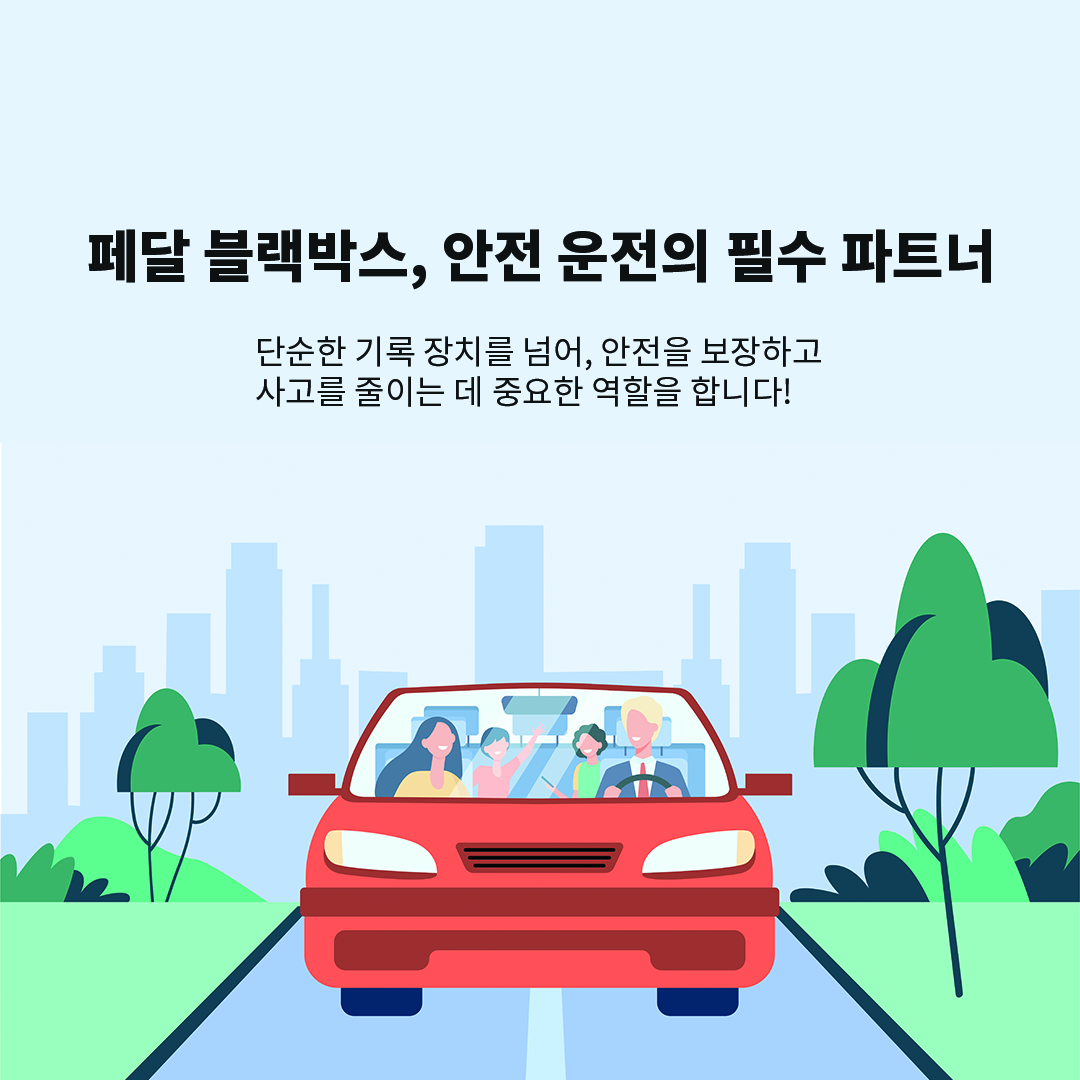
<style>
.page{position:relative;width:1080px;height:1080px;background:#e6f6ff}
.page>*{position:absolute;margin:0}
.t1{font:13.5px "NotoSansCJKkr-Black";color:#0e1112}
.t2{font:33.3px "NotoSansCJKkr-Regular";color:#0e1112}
</style>
<div class="page">
<p class="t1" style="left:88px;top:229px;width:903px;height:61px">페달 블랙박스, 안전 운전의 필수 파트너</p>
<p class="t2" style="left:256px;top:336px;width:565px;height:71px">단순한 기록 장치를 넘어, 안전을 보장하고 <br>사고를 줄이는 데 중요한 역할을 합니다!</p>
</div>
